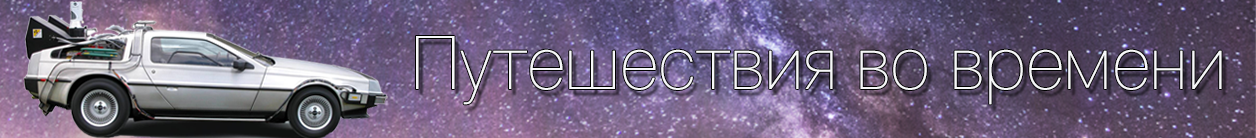
<style>
.page{position:relative;width:1256px;height:138px}
.page>*{position:absolute;margin:0}
.t1{font:72.8px "HeliosThinC";color:#f7f8f9}
</style>
<div class="page">
<p class="t1" style="left:416px;top:36px;width:806px;height:69px">Путешествия во времени</p>
</div>
